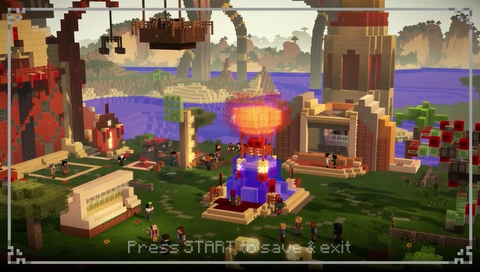
<style>
.page{position:relative;width:480px;height:272px}
.page>*{position:absolute;margin:0}
.t1{font:14px "Minecraft";color:#787e6a}
</style>
<div class="page">
<p class="t1" style="left:128px;top:240px;width:223px;height:13px">Press START to save &amp; exit</p>
</div>
